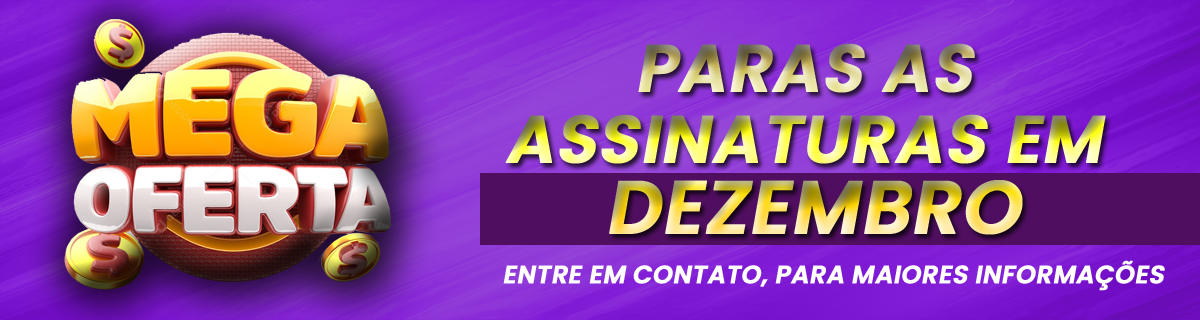
<style>
.page{position:relative;width:1200px;height:320px}
.page>*{position:absolute;margin:0}
.t1{font:66.7px/70.8px "Poppins-SemiBold";text-transform:uppercase;font-weight:bold;font-style:italic}
.t2{font:75px/70.8px "Poppins-SemiBold";text-transform:uppercase;font-weight:bold;font-style:italic}
.t3{font:25px "Poppins-SemiBold";color:#ffffff;text-transform:uppercase;font-weight:bold;font-style:italic}
</style>
<div class="page">
<p class="t1" style="left:505px;top:43px;width:601px;height:192px;text-align:center">PARAS AS <br>ASSINATURAS EM <br><span class="t2">DEZEMBRO</span></p>
<p class="t3" style="left:503px;top:260px;width:662px;height:31px">ENTRE EM CONTATO, PARA MAIORES INFORMAÇÕES</p>
</div>
